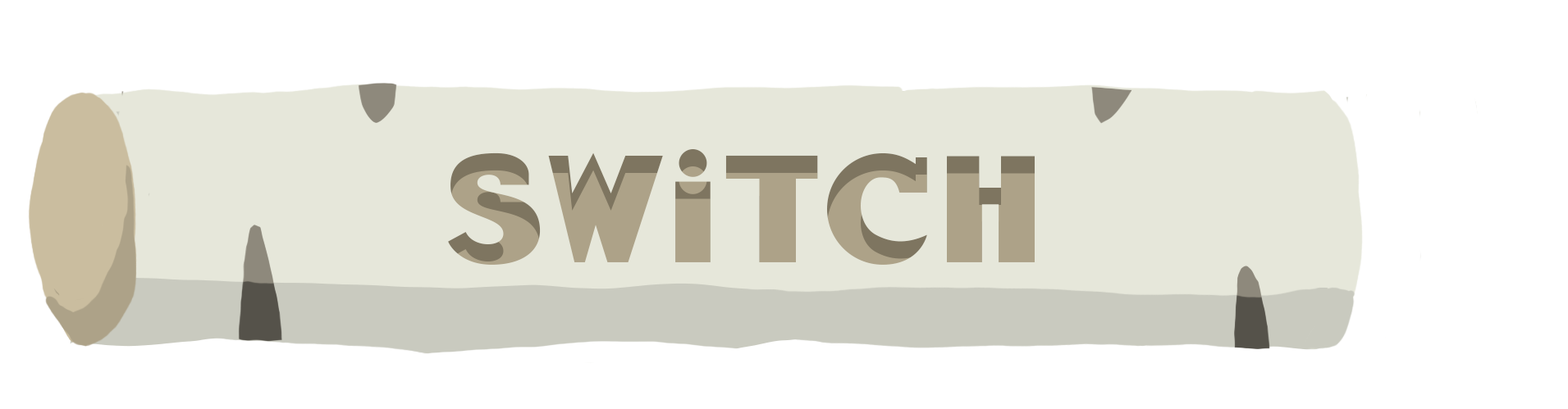
<style>
.page{position:relative;width:1568px;height:409px;background:#ffffff}
.page>*{position:absolute;margin:0}
.t1{font:148px "BadTyp-Regular";color:#ada288}
</style>
<div class="page">
<p class="t1" style="left:448px;top:149px;width:587px;height:116px">Switch</p>
</div>
